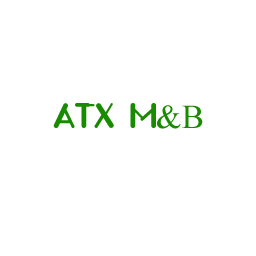
<style>
.page{position:relative;width:256px;height:256px;background:#ffffff}
.page>*{position:absolute;margin:0}
.t1{font:33.3px "Untitled";color:#198b00}
.t2{font:33.3px "TimesNewRomanPSMT";color:#198b00}
</style>
<div class="page">
<p class="t1" style="left:53px;top:103px;width:150px;height:26px">ATX M<span class="t2">&amp;B</span></p>
</div>
